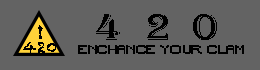
<style>
.page{position:relative;width:260px;height:70px;background:#636363}
.page>*{position:absolute;margin:0}
.t1{font:38.7px "Algerian";letter-spacing:0.5em;color:#000000;scale:1.14 1}
.t2{font:21.1px "Algerian";color:#000000}
.t3{font:15.8px "Chalkduster";color:#000000}
.t4{font:12.2px "Minecraft";letter-spacing:-0.025em;color:#000000;scale:1.21 1}
</style>
<div class="page">
<p class="t1" style="left:96px;top:14px;width:121px;height:26px">420</p>
<p class="t2" style="left:38px;top:25px;width:5px;height:14px">!</p>
<p class="t3" style="left:23px;top:42px;width:33px;height:12px">420</p>
<p class="t4" style="left:78px;top:45px;width:166px;height:9px">ENCHANCE YOUR CLAM</p>
</div>
